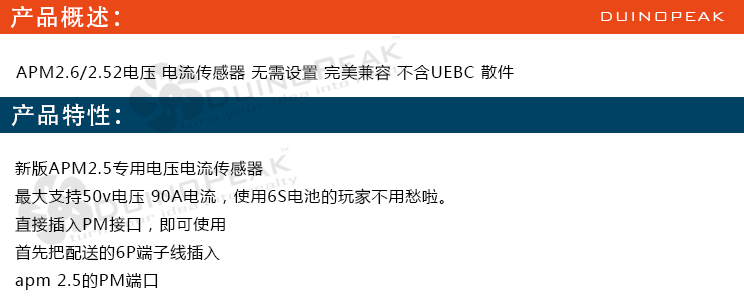
<style>
.page{position:relative;width:744px;height:306px;background:#ffffff}
.page>*{position:absolute;margin:0}
.t1{font:24px "AdobeHeitiStd-Regular";letter-spacing:0.05em;color:#ffffff}
.t2{font:18px "BankGothicBT-Light";letter-spacing:0.05em;color:#ffffff}
.t3{font:16px "MicrosoftYaHei";letter-spacing:0.05em;color:#000000}
</style>
<div class="page">
<p class="t1" style="left:10px;top:6px;width:109px;height:23px">产品概述：</p>
<p class="t2" style="left:601px;top:12px;width:124px;height:9px">DUINOPEAK</p>
<p class="t3" style="left:16px;top:64px;width:498px;height:17px">APM2.6/2.52电压 电流传感器 无需设置 完美兼容 不含UEBC 散件</p>
<p class="t1" style="left:11px;top:103px;width:109px;height:24px">产品特性：</p>
<p class="t3" style="left:15px;top:160px;width:429px;height:130px">新版APM2.5专用电压电流传感器<br>最大支持50v电压 90A电流，使用6S电池的玩家不用愁啦。<br>直接插入PM接口，即可使用<br>首先把配送的6P端子线插入<br>apm 2.5的PM端口</p>
</div>
